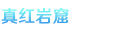
<style>
.page{position:relative;width:128px;height:32px;background:#ffffff}
.page>*{position:absolute;margin:0}
.t1{font:17.3px "HYWenHei-FEW";letter-spacing:0.025em;scale:0.97 1}
</style>
<div class="page">
<p class="t1" style="left:1px;top:7px;width:68px;height:17px">真红岩窟</p>
</div>
